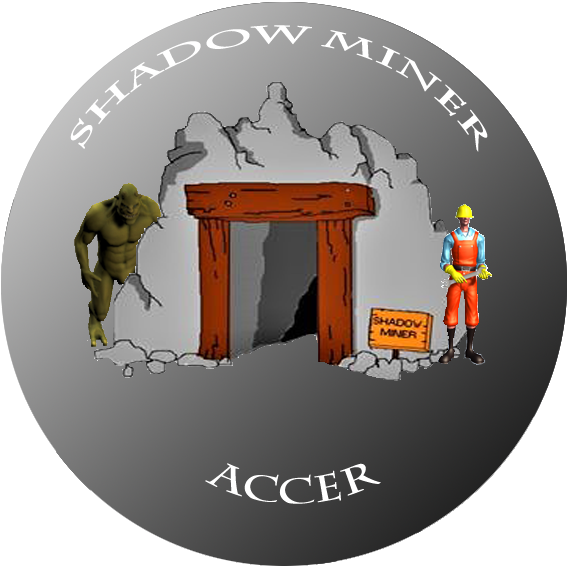
<style>
.page{position:relative;width:567px;height:567px;background:#ffffff}
.page>*{position:absolute;margin:0}
.t1{font:24px "CharlemagneStd-Bold";color:#ffffff}
.t2{font:36px "CharlemagneStd-Bold";color:#ffffff}
</style>
<div class="page">
<p class="t1" style="left:70px;top:25px;width:418px;height:127px;text-align:center">SHADOW MINER</p>
<p class="t2" style="left:205px;top:463px;width:176px;height:41px">ACCEr</p>
</div>
